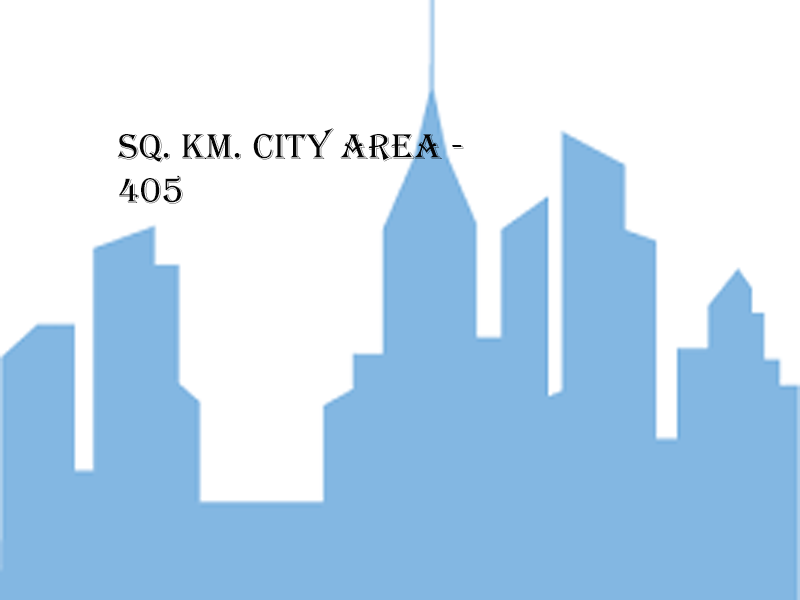
<style>
.page{position:relative;width:800px;height:600px;background:#ffffff}
.page>*{position:absolute;margin:0}
.t1{font:37px "Algerian";color:#050505}
</style>
<div class="page">
<p class="t1" style="left:117px;top:128px;width:347px;height:76px">sq. km. city area -<br>405</p>
</div>
